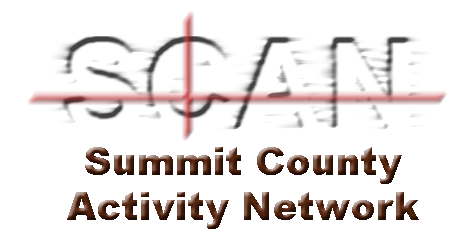
<style>
.page{position:relative;width:474px;height:243px;background:#ffffff}
.page>*{position:absolute;margin:0}
.t1{font:37.5px "Arial-Black"}
</style>
<div class="page">
<p class="t1" style="left:67px;top:147px;width:352px;height:82px;text-align:center">Summit County<br>Activity Network</p>
</div>
